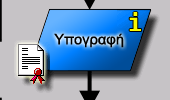
<style>
.page{position:relative;width:170px;height:100px;background:#c6c3c6}
.page>*{position:absolute;margin:0}
.t1{font:14.7px "ArialMT";color:#000000}
</style>
<div class="page">
<p class="t1" style="left:54px;top:33px;width:70px;height:15px">Υπογραφή</p>
</div>
